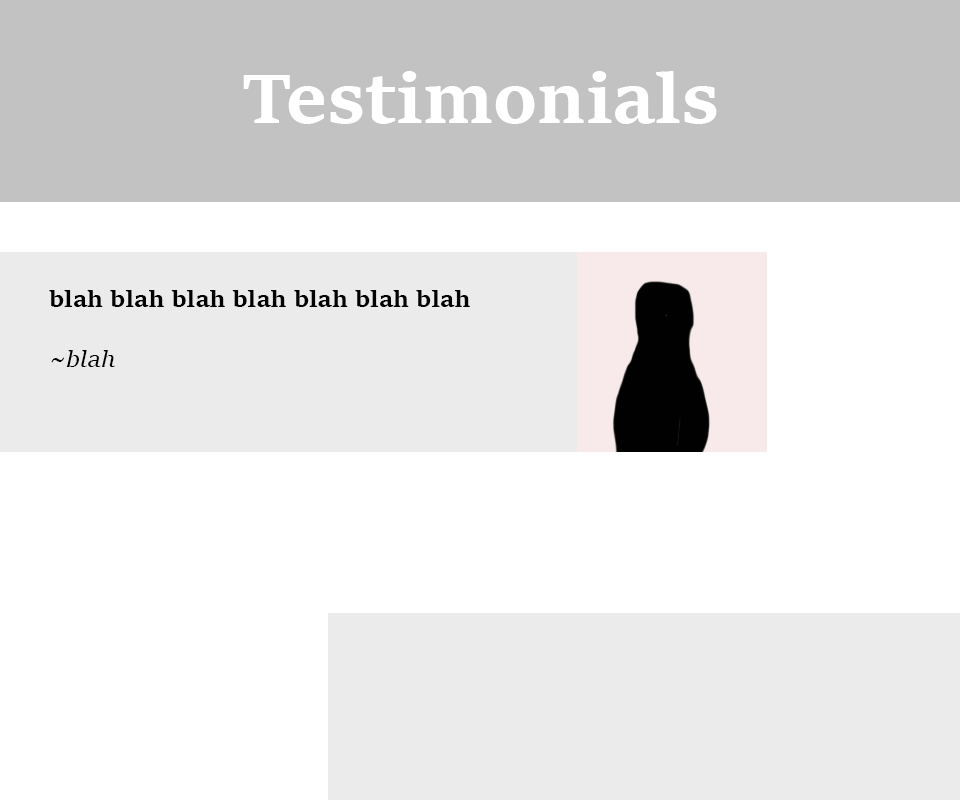
<style>
.page{position:relative;width:960px;height:800px;background:#ffffff}
.page>*{position:absolute;margin:0}
.t1{font:75px "SitkaText-Bold";color:#ffffff}
.t2{font:25px "SitkaText-Bold";color:#010101}
.t3{font:25px "SitkaText-Italic";color:#010101}
</style>
<div class="page">
<p class="t1" style="left:243px;top:71px;width:474px;height:53px">Testimonials</p>
<p class="t2" style="left:49px;top:290px;width:421px;height:77px">blah blah blah blah blah blah blah <br><br><span class="t3">~blah</span></p>
</div>
